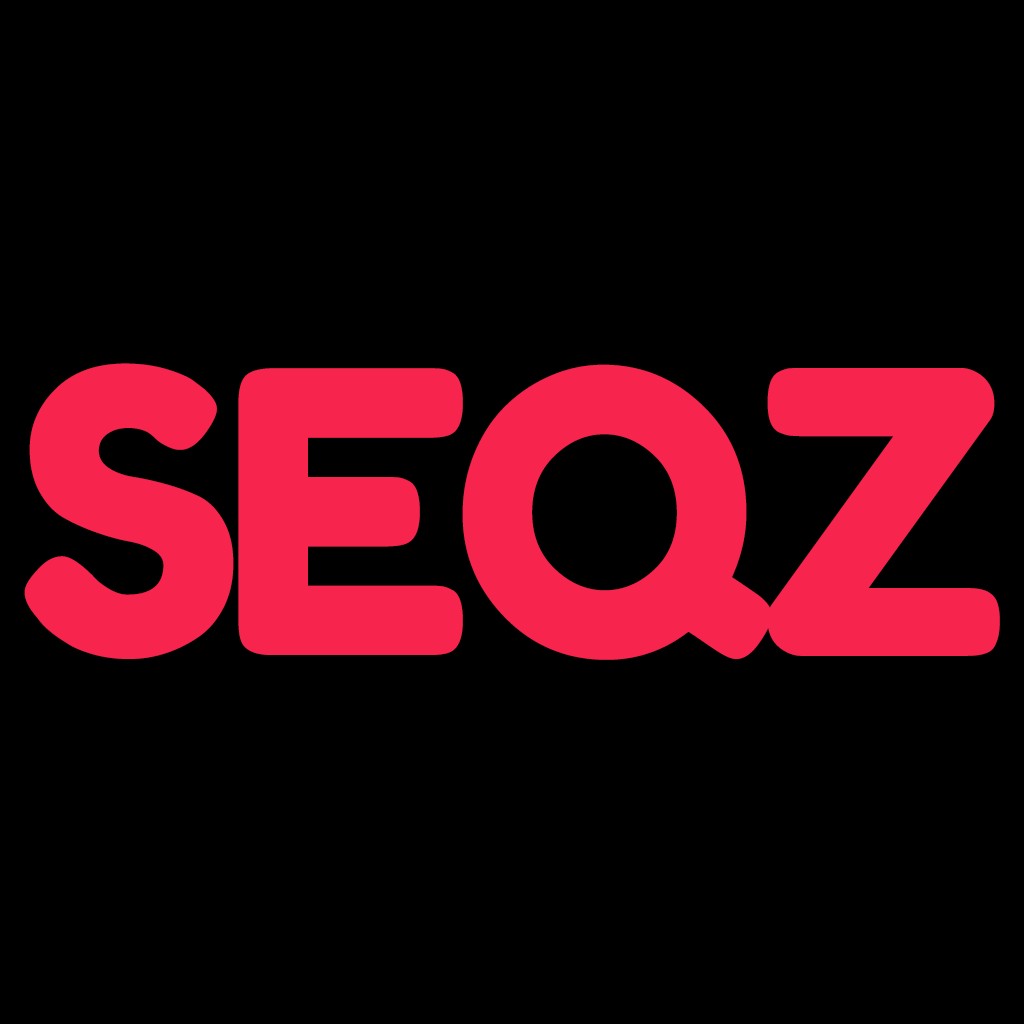
<style>
.page{position:relative;width:1024px;height:1024px;background:#000000}
.page>*{position:absolute;margin:0}
.t1{font:391.1px "FredokaOne-Regular";letter-spacing:-0.05em;color:#f7244d}
</style>
<div class="page">
<p class="t1" style="left:24px;top:363px;width:976px;height:297px">SEQZ</p>
</div>
